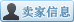
<style>
.page{position:relative;width:74px;height:22px}
.page>*{position:absolute;margin:0}
.t1{font:12px "SimSun";color:#598db3;font-weight:bold}
</style>
<div class="page">
<p class="t1" style="left:22px;top:6px;width:49px;height:12px">卖家信息</p>
</div>
